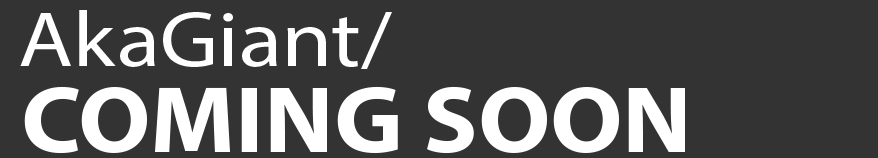
<style>
.page{position:relative;width:878px;height:158px;background:#333333}
.page>*{position:absolute;margin:0}
.t1{font:78.5px "MyriadPro-Regular";color:#ffffff;scale:1.14 1}
.t2{font:95.1px "MyriadPro-Bold";color:#ffffff;scale:1.06 1}
</style>
<div class="page">
<p class="t1" style="left:20px;top:10px;width:372px;height:59px">AkaGiant/</p>
<p class="t2" style="left:24px;top:86px;width:661px;height:68px">COMING SOON</p>
</div>
